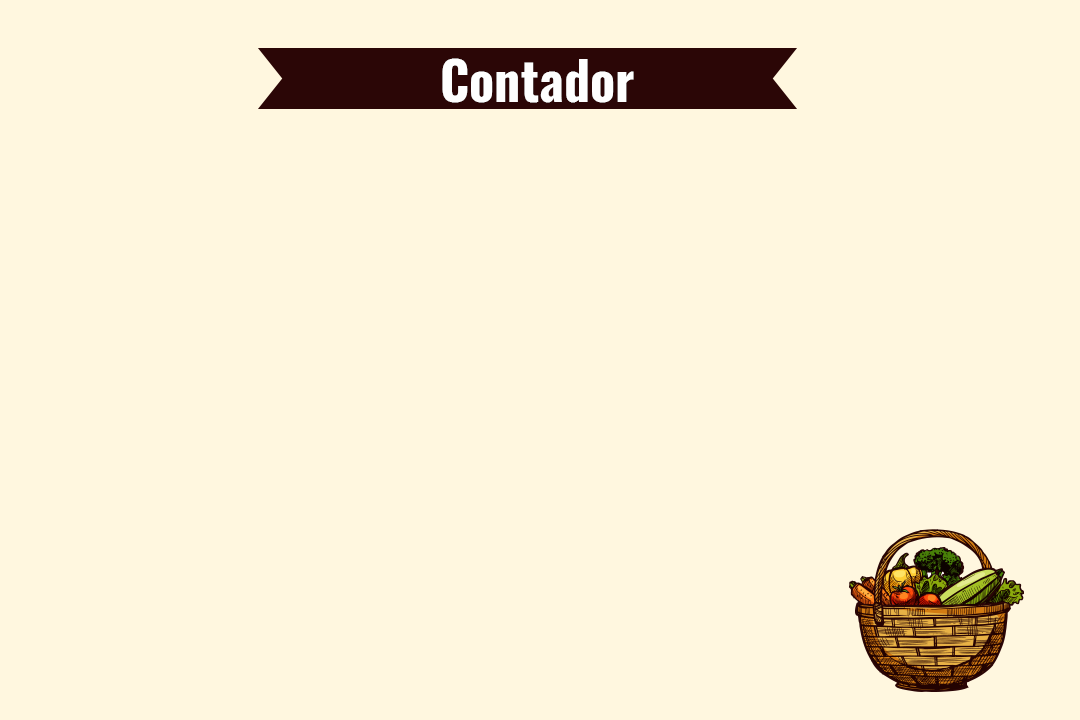
<style>
.page{position:relative;width:1080px;height:720px;background:#fff7df}
.page>*{position:absolute;margin:0}
.t1{font:51.7px "Oswald-Bold";color:#fefefe}
</style>
<div class="page">
<p class="t1" style="left:442px;top:58px;width:192px;height:45px">Contador</p>
</div>
